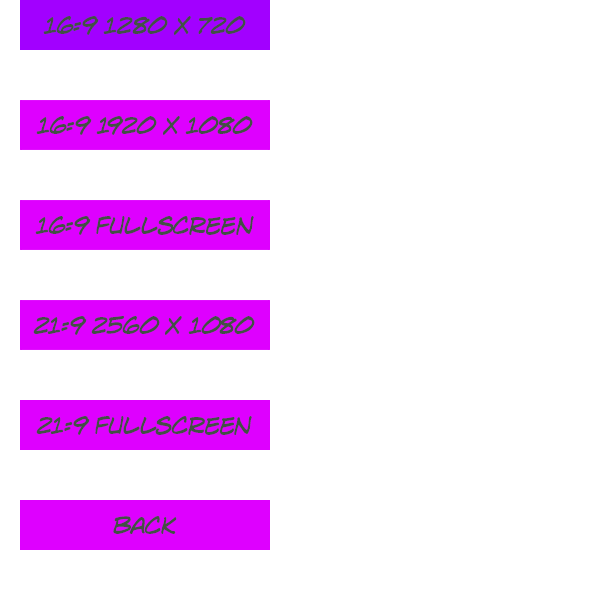
<style>
.page{position:relative;width:600px;height:600px;background:#ffffff}
.page>*{position:absolute;margin:0}
.t1{font:25px "LintMcCreeIntlBB-Italic";letter-spacing:-0.05em;color:#434f45}
</style>
<div class="page">
<p class="t1" style="left:43px;top:16px;width:203px;height:19px">16:9 1280 x 720</p>
<p class="t1" style="left:36px;top:116px;width:217px;height:19px">16:9 1920 x 1080</p>
<p class="t1" style="left:35px;top:216px;width:219px;height:19px">16:9 Fullscreen</p>
<p class="t1" style="left:33px;top:316px;width:222px;height:19px">21:9 2560 x 1080</p>
<p class="t1" style="left:36px;top:416px;width:216px;height:19px">21:9 Fullscreen</p>
<p class="t1" style="left:113px;top:516px;width:64px;height:18px">Back</p>
</div>
